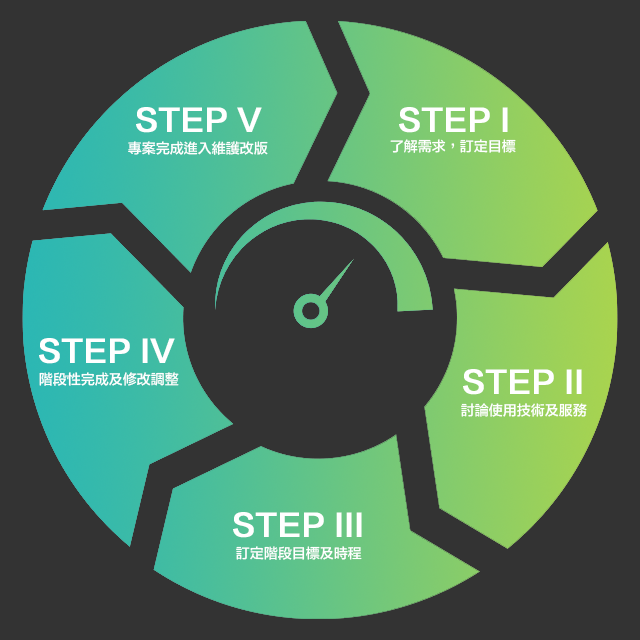
<style>
.page{position:relative;width:640px;height:640px;background:#333333}
.page>*{position:absolute;margin:0}
.t1{font:30px "FZLTZHB--B51-0";color:#ffffff;font-weight:bold}
.t2{font:14px "FZLTZHB--B51-0";color:#ffffff}
</style>
<div class="page">
<p class="t1" style="left:136px;top:107px;width:126px;height:26px">STEP V</p>
<p class="t1" style="left:399px;top:107px;width:109px;height:26px">STEP I</p>
<p class="t2" style="left:128px;top:141px;width:140px;height:14px">專案完成進入維護改版</p>
<p class="t2" style="left:390px;top:139px;width:126px;height:14px">了解需求，訂定目標</p>
<p class="t1" style="left:39px;top:338px;width:136px;height:26px">STEP IV</p>
<p class="t2" style="left:39px;top:372px;width:140px;height:14px">階段性完成及修改調整</p>
<p class="t1" style="left:463px;top:369px;width:119px;height:26px">STEP II</p>
<p class="t2" style="left:461px;top:403px;width:126px;height:14px">討論使用技術及服務</p>
<p class="t1" style="left:233px;top:512px;width:129px;height:26px">STEP III</p>
<p class="t2" style="left:236px;top:546px;width:126px;height:14px">訂定階段目標及時程</p>
</div>
